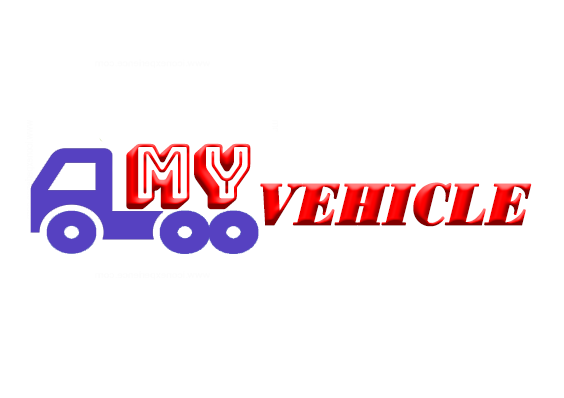
<style>
.page{position:relative;width:564px;height:398px;background:#ffffff}
.page>*{position:absolute;margin:0}
.t1{font:74.4px "BungeeShade-Regular";font-weight:bold;scale:0.96 1}
.t2{font:61.3px "BodoniMTBlack-Italic";font-weight:bold;scale:0.82 1}
</style>
<div class="page">
<p class="t1" style="left:126px;top:143px;width:125px;height:67px">MY</p>
<p class="t2" style="left:260px;top:182px;width:272px;height:45px">VEHICLE</p>
</div>
